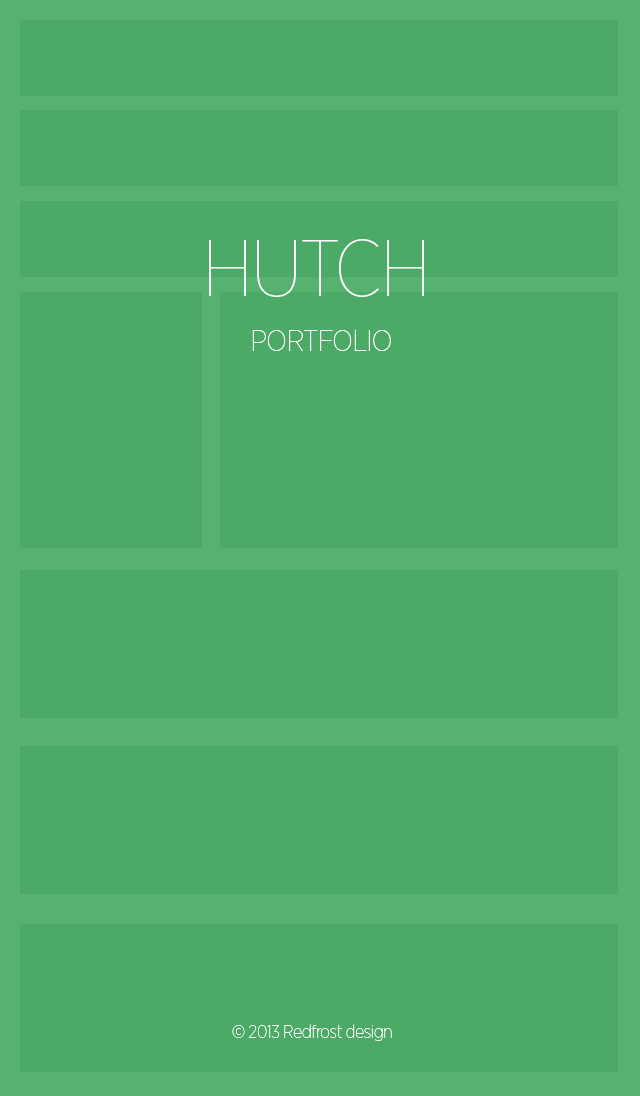
<style>
.page{position:relative;width:640px;height:1096px;background:#4caa67}
.page>*{position:absolute;margin:0}
.t1{font:80px "GothamNarrow-Thin";letter-spacing:-0.025em;color:#ffffff}
.t2{font:30px "GothamNarrow-Thin";letter-spacing:-0.025em;color:#ffffff}
.t3{font:18px "GothamNarrow-Thin";letter-spacing:-0.025em;color:#ffffff}
</style>
<div class="page">
<p class="t1" style="left:209px;top:239px;width:215px;height:58px">HUTCH</p>
<p class="t2" style="left:252px;top:330px;width:139px;height:21px">PORTFOLIO</p>
<p class="t3" style="left:232px;top:1024px;width:160px;height:17px">© 2013 Redfrost design</p>
</div>
